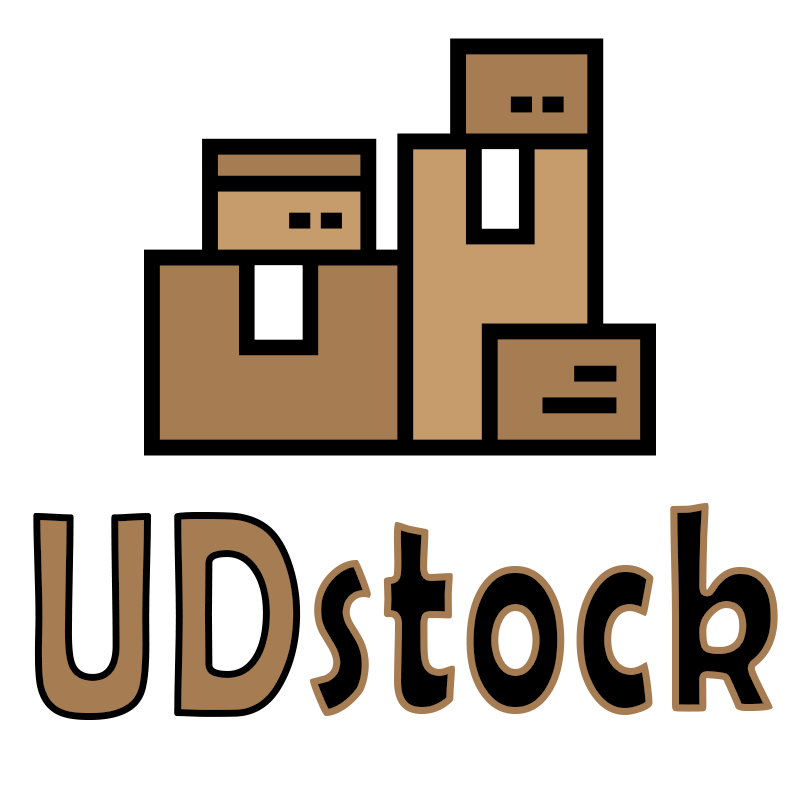
<style>
.page{position:relative;width:800px;height:800px;background:#ffffff}
.page>*{position:absolute;margin:0}
.t1{font:296.9px "BerlinSansFBDemi-Bold";letter-spacing:0.03em;scale:0.67 1}
.t2{font:296.9px "BerlinSansFBDemi-Bold";letter-spacing:0.03em;color:#a67c52;scale:0.67 1}
</style>
<div class="page">
<p class="t1" style="left:310px;top:503px;width:468px;height:213px">stock</p>
<p class="t2" style="left:33px;top:512px;width:268px;height:208px">UD</p>
</div>
